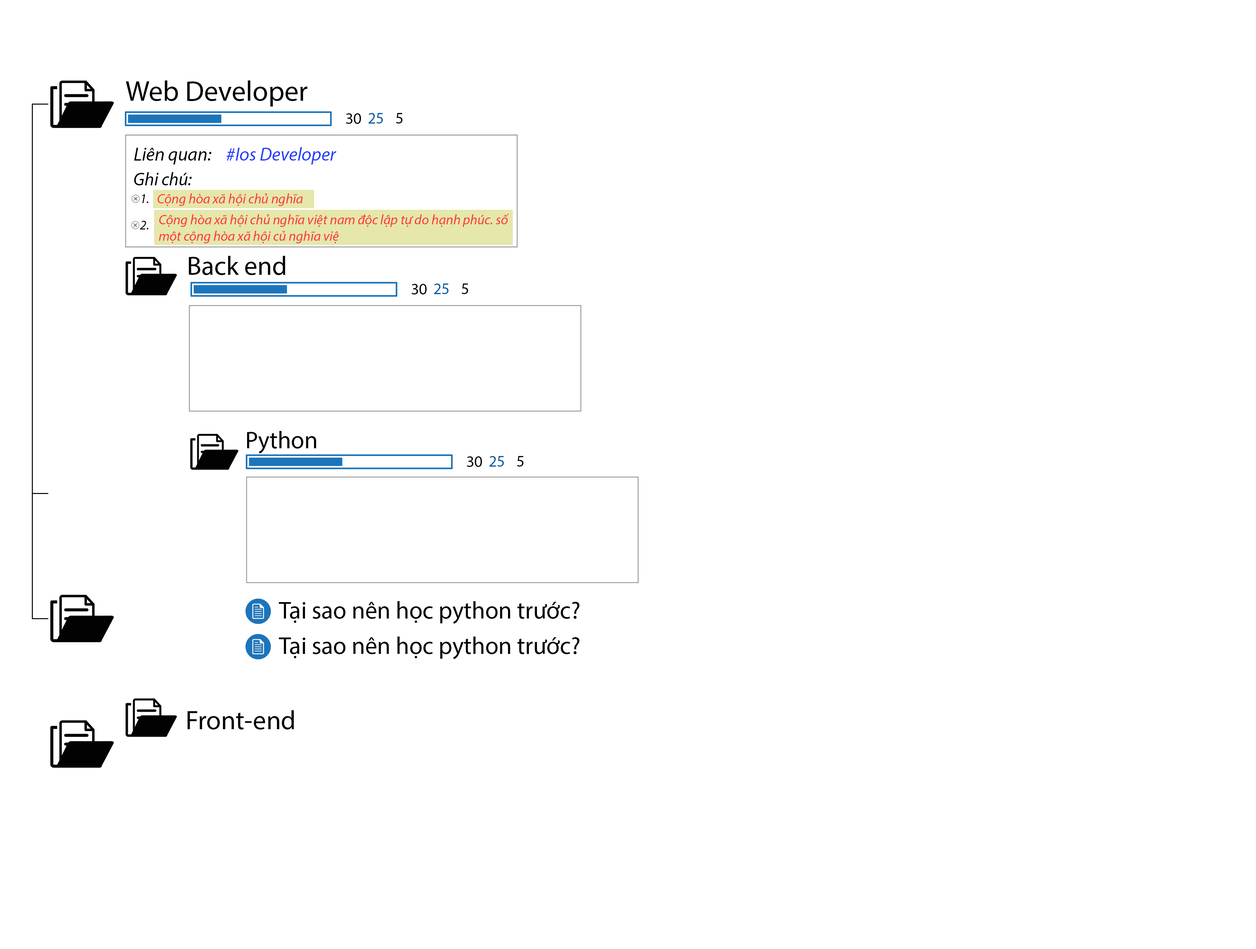
<style>
.page{position:relative;width:1256px;height:949px;background:#ffffff}
.page>*{position:absolute;margin:0}
.t1{font:28.6px "MyriadPro-Regular";color:#000000}
.t2{font:16.3px "MyriadPro-Regular";color:#000000}
.t3{font:16.3px "MyriadPro-Regular";color:#075b9e}
.t4{font:18.7px "MyriadPro-It";color:#000000}
.t5{font:18.7px "MyriadPro-It";color:#263ff8}
.t6{font:18.4px "MyriadPro-It";color:#000000}
.t7{font:13.1px "MyriadPro-It";color:#000000}
.t8{font:13.7px "MyriadPro-It";color:#ff3535}
.t9{font:26.7px "MyriadPro-Regular";color:#000000}
.t10{font:24.3px "MyriadPro-Regular";color:#000000}
</style>
<div class="page">
<p class="t1" style="left:126px;top:80px;width:182px;height:27px">Web Developer</p>
<p class="t2" style="left:346px;top:113px;width:15px;height:11px">30</p>
<p class="t3" style="left:368px;top:113px;width:15px;height:11px">25</p>
<p class="t2" style="left:396px;top:113px;width:7px;height:11px">5</p>
<p class="t4" style="left:134px;top:148px;width:77px;height:16px">Liên quan:</p>
<p class="t5" style="left:227px;top:147px;width:110px;height:17px">#Ios Developer</p>
<p class="t6" style="left:134px;top:172px;width:58px;height:13px">Ghi chú:</p>
<p class="t7" style="left:142px;top:194px;width:6px;height:9px">1.</p>
<p class="t8" style="left:158px;top:193px;width:145px;height:13px">Cộng hòa xã hội chủ nghĩa</p>
<p class="t7" style="left:140px;top:221px;width:8px;height:8px">2.</p>
<p class="t8" style="left:159px;top:214px;width:350px;height:29px">Cộng hòa xã hội chủ nghĩa việt nam độc lập tự do hạnh phúc. số<br>một cộng hòa xã hội củ nghĩa việ</p>
<p class="t9" style="left:189px;top:256px;width:96px;height:19px">Back end</p>
<p class="t2" style="left:412px;top:284px;width:15px;height:10px">30</p>
<p class="t3" style="left:434px;top:284px;width:15px;height:10px">25</p>
<p class="t2" style="left:462px;top:284px;width:6px;height:10px">5</p>
<p class="t10" style="left:247px;top:431px;width:69px;height:23px">Python</p>
<p class="t2" style="left:467px;top:456px;width:15px;height:11px">30</p>
<p class="t3" style="left:490px;top:456px;width:14px;height:11px">25</p>
<p class="t2" style="left:517px;top:456px;width:7px;height:11px">5</p>
<p class="t10" style="left:279px;top:601px;width:301px;height:23px">Tại sao nên học python trước?</p>
<p class="t10" style="left:279px;top:637px;width:301px;height:22px">Tại sao nên học python trước?</p>
<p class="t9" style="left:188px;top:710px;width:106px;height:20px">Front-end</p>
</div>
